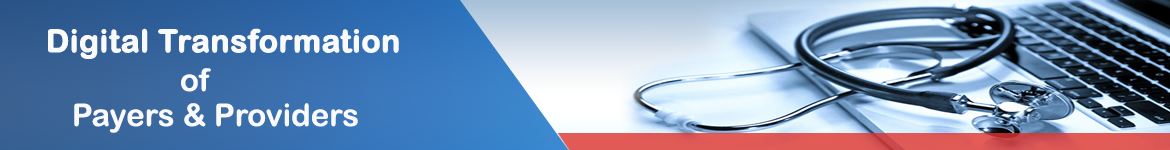
<style>
.page{position:relative;width:1170px;height:150px}
.page>*{position:absolute;margin:0}
.t1{font:31.2px "ArialRoundedMTBold";color:#fafafb;font-weight:bold}
.t2{font:31.2px "ArialRoundedMTBold";color:#fafafb}
</style>
<div class="page">
<p class="t1" style="left:48px;top:28px;width:351px;height:31px">Digital Transformation</p>
<p class="t2" style="left:181px;top:68px;width:30px;height:24px">of</p>
<p class="t2" style="left:74px;top:103px;width:284px;height:30px">Payers &amp; Providers</p>
</div>
